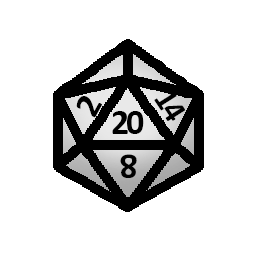
<style>
.page{position:relative;width:256px;height:256px;background:#ffffff}
.page>*{position:absolute;margin:0}
.t1{font:36px "Calibri-Bold";letter-spacing:-0.1em;color:#000000}
.t2{font:33.3px "Calibri-Bold";letter-spacing:-0.1em;color:#000000}
</style>
<div class="page">
<p class="t1" style="left:76px;top:96px;width:26px;height:22px;rotate:-61deg">2</p>
<p class="t2" style="left:154px;top:90px;width:31px;height:31px;rotate:56deg">14</p>
<p class="t1" style="left:112px;top:111px;width:32px;height:23px">20</p>
<p class="t1" style="left:120px;top:154px;width:17px;height:24px;rotate:-180deg">8</p>
</div>
